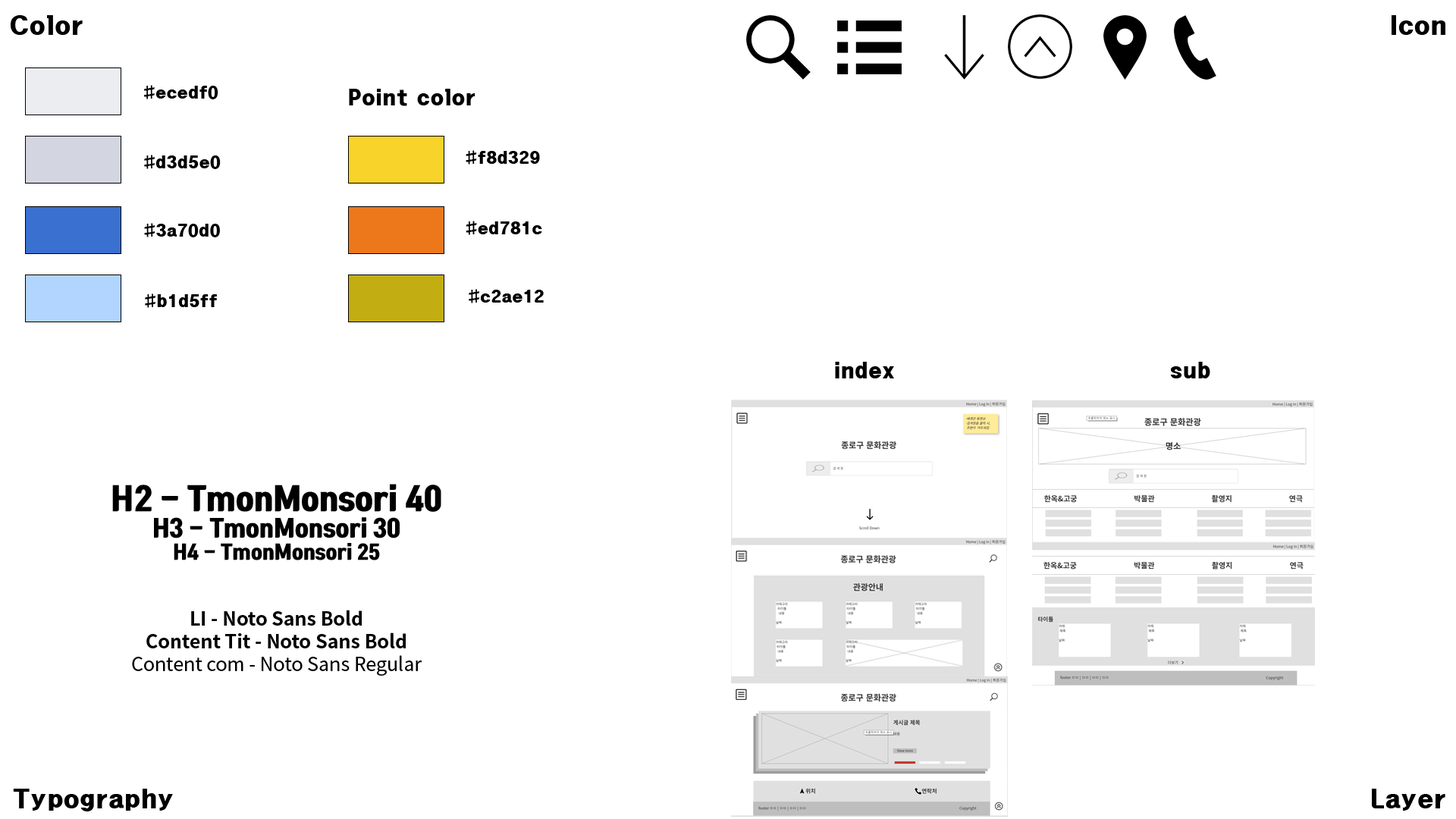
<style>
.page{position:relative;width:1456px;height:819px;background:#ffffff}
.page>*{position:absolute;margin:0}
.t1{font:22.7px "HeadlineR-HM";color:#000000}
.t2{font:15.2px "HeadlineR-HM";color:#000000}
.t3{font:19px "HeadlineR-HM";color:#000000}
.t4{font:19px "NotoSansKR-Bold";color:#000000}
.t5{font:30.3px "TmonMonsoriBlack";color:#000000}
.t6{font:22.7px "TmonMonsoriBlack";color:#000000}
.t7{font:19px "TmonMonsoriBlack";color:#000000}
.t8{font:19px "NotoSansKR-Regular";color:#000000}
</style>
<div class="page">
<p class="t1" style="left:11px;top:15px;width:72px;height:20px">Color</p>
<p class="t1" style="left:1392px;top:15px;width:53px;height:20px">Icon</p>
<p class="t2" style="left:144px;top:85px;width:74px;height:14px">#ecedf0</p>
<p class="t3" style="left:349px;top:89px;width:126px;height:17px">Point color</p>
<p class="t2" style="left:144px;top:155px;width:77px;height:14px">#d3d5e0</p>
<p class="t2" style="left:466px;top:150px;width:74px;height:15px">#f8d329</p>
<p class="t2" style="left:466px;top:221px;width:76px;height:14px">#ed781c</p>
<p class="t2" style="left:144px;top:223px;width:76px;height:14px">#3a70d0</p>
<p class="t2" style="left:145px;top:293px;width:72px;height:15px">#b1d5ff</p>
<p class="t2" style="left:469px;top:289px;width:75px;height:14px">#c2ae12</p>
<p class="t3" style="left:835px;top:362px;width:375px;height:16px">index                             sub</p>
<p class="t4" style="left:112px;top:484px;width:329px;height:192px;text-align:center"><span class="t5">H2 - TmonMonsori 40<br></span><span class="t6">H3 - TmonMonsori 30<br></span><span class="t7">H4 - TmonMonsori 25<br><br><br></span>LI - Noto Sans Bold<br>Content Tit - Noto Sans Bold<br><span class="t8">Content com - Noto Sans Regular</span></p>
<p class="t1" style="left:13px;top:789px;width:160px;height:22px">Typography</p>
<p class="t1" style="left:1372px;top:789px;width:73px;height:22px">Layer</p>
</div>
